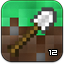
<style>
.page{position:relative;width:64px;height:64px}
.page>*{position:absolute;margin:0}
.t1{font:8px "microN55";color:#ffffff}
</style>
<div class="page">
<p class="t1" style="left:49px;top:50px;width:8px;height:5px">12</p>
</div>
